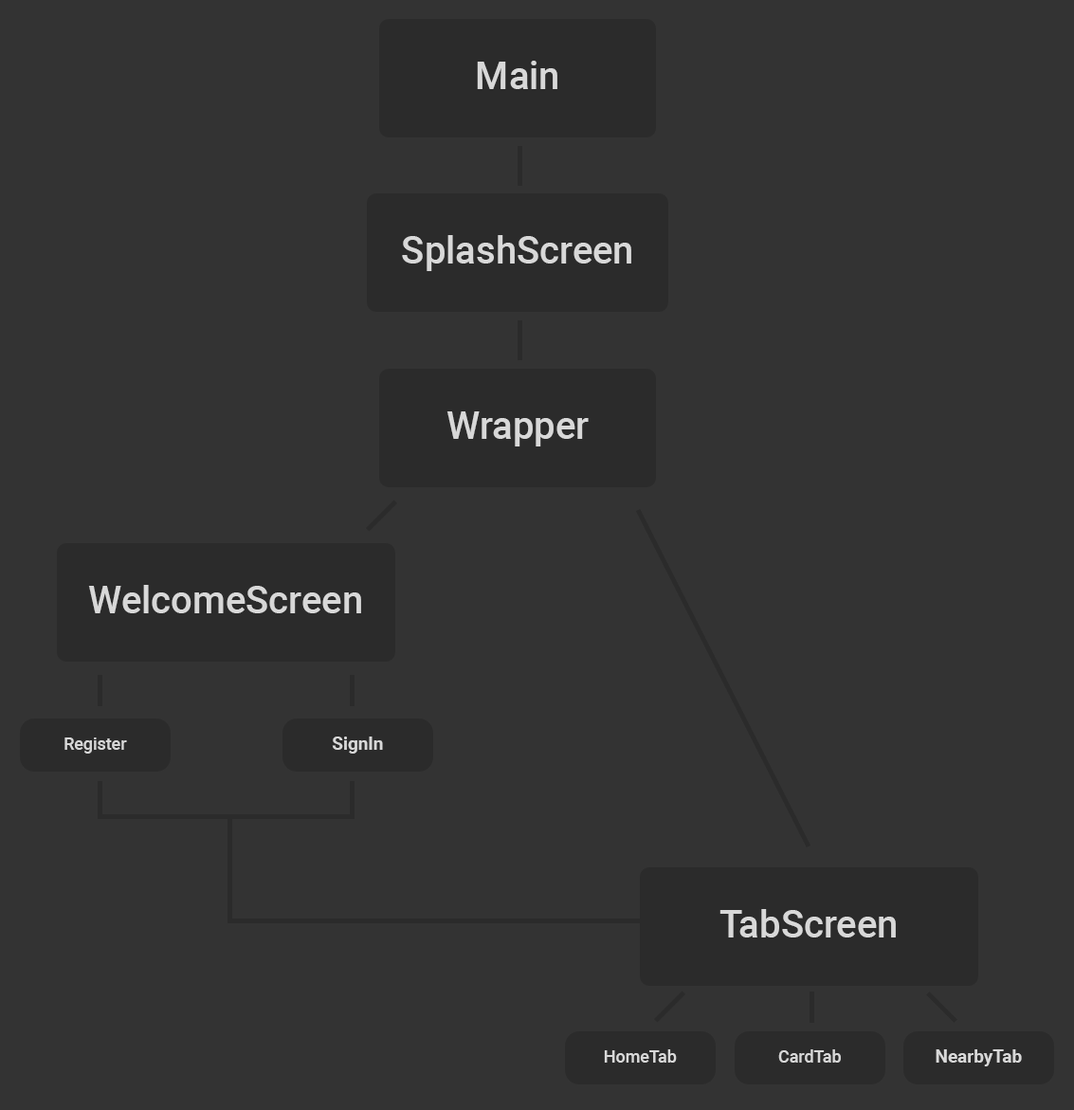
<style>
.page{position:relative;width:1074px;height:1110px;background:#333333}
.page>*{position:absolute;margin:0}
.t1{font:37.9px "Roboto-Medium";color:#d8d8d8}
.t2{font:17px "Roboto-Medium";color:#d8d8d8}
.t3{font:18px "Roboto-Bold";color:#d8d8d8}
</style>
<div class="page">
<p class="t1" style="left:477px;top:61px;width:80px;height:28px">Main</p>
<p class="t1" style="left:402px;top:235px;width:229px;height:36px">SplashScreen</p>
<p class="t1" style="left:447px;top:411px;width:142px;height:36px">Wrapper</p>
<p class="t1" style="left:88px;top:585px;width:273px;height:28px">WelcomeScreen</p>
<p class="t2" style="left:64px;top:738px;width:63px;height:16px">Register</p>
<p class="t3" style="left:332px;top:737px;width:51px;height:17px">SignIn</p>
<p class="t1" style="left:720px;top:909px;width:176px;height:29px">TabScreen</p>
<p class="t2" style="left:604px;top:1049px;width:73px;height:14px">HomeTab</p>
<p class="t2" style="left:778px;top:1049px;width:63px;height:14px">CardTab</p>
<p class="t3" style="left:936px;top:1049px;width:86px;height:18px">NearbyTab</p>
</div>
